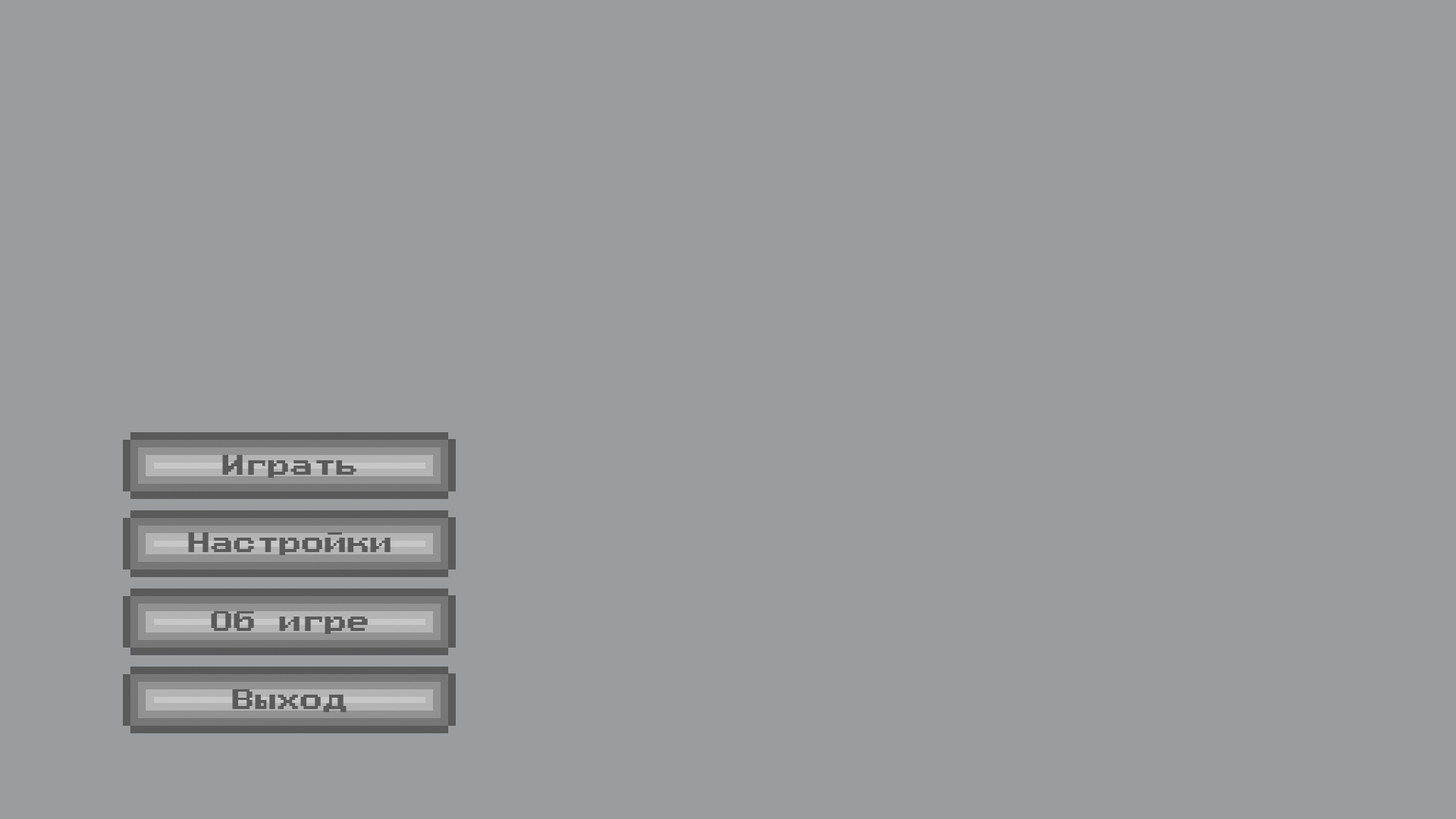
<style>
.page{position:relative;width:1456px;height:819px;background:#9b9ca0}
.page>*{position:absolute;margin:0}
.t1{font:22.7px "PressStart2P-Regular";color:#5a5a5a}
</style>
<div class="page">
<p class="t1" style="left:222px;top:455px;width:134px;height:23px">Играть</p>
<p class="t1" style="left:188px;top:532px;width:203px;height:23px">Настройки</p>
<p class="t1" style="left:211px;top:611px;width:157px;height:23px">Об игре</p>
<p class="t1" style="left:232px;top:689px;width:115px;height:23px">Выход</p>
</div>
